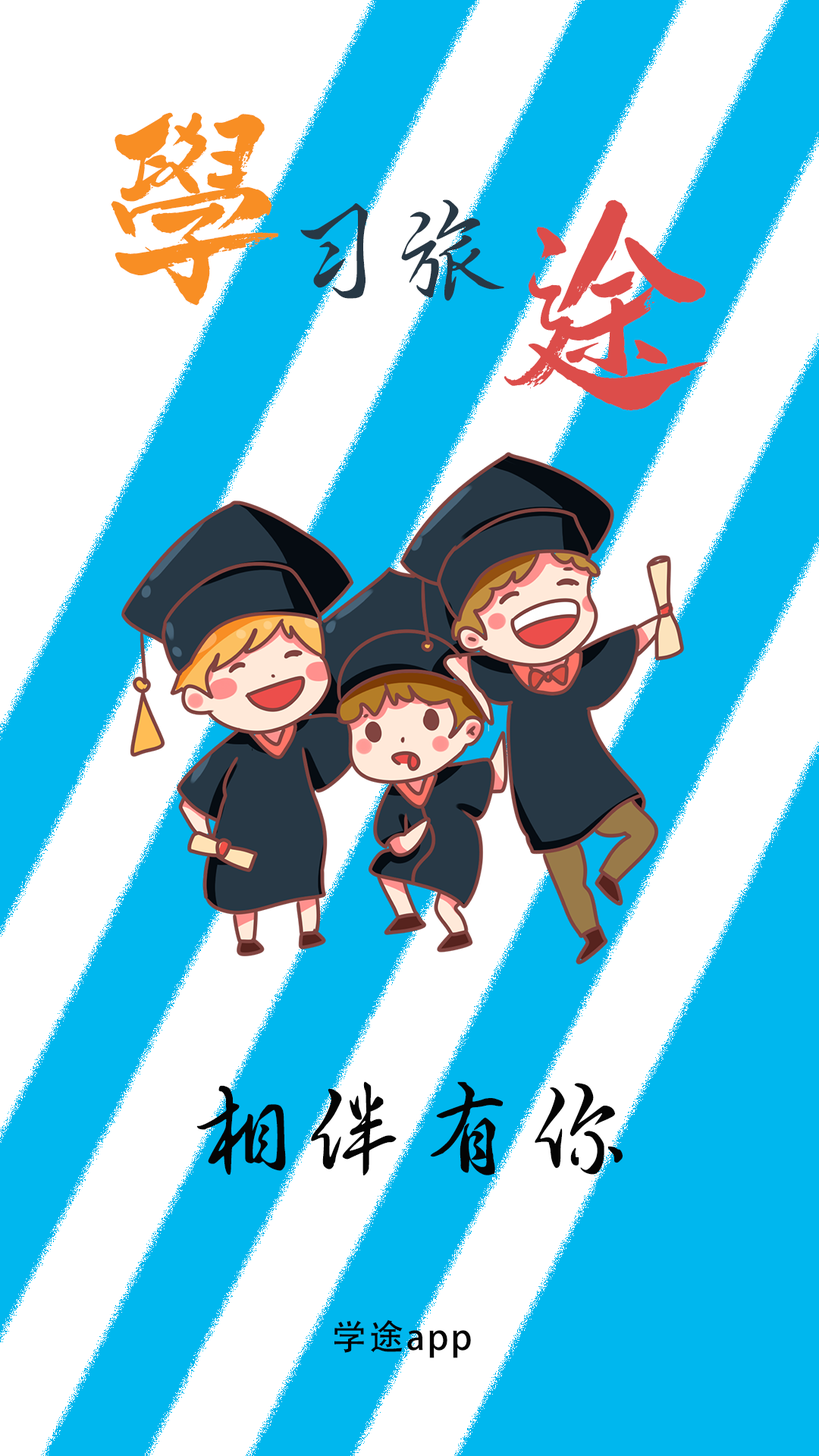
<style>
.page{position:relative;width:819px;height:1456px;background:#00b7ee}
.page>*{position:absolute;margin:0}
.t1{font:210.6px "HBJGTPFT--GB1-0";letter-spacing:0.06em;color:#f88e24}
.t2{font:111.9px "yizhiqingshu";letter-spacing:0.06em;color:#273845}
.t3{font:231px "HBJGTPFT--GB1-0";letter-spacing:0.06em;color:#dc4d4a}
.t4{font:106.2px "yizhiqingshu";letter-spacing:0.06em;color:#040404}
.t5{font:35.2px "AdobeHeitiStd-Regular";letter-spacing:0.06em;color:#040404}
</style>
<div class="page">
<p class="t1" style="left:111px;top:112px;width:168px;height:194px">学</p>
<p class="t2" style="left:300px;top:199px;width:204px;height:102px">习旅</p>
<p class="t3" style="left:504px;top:199px;width:204px;height:212px">途</p>
<p class="t4" style="left:196px;top:1081px;width:427px;height:94px">相伴有你</p>
<p class="t5" style="left:334px;top:1319px;width:137px;height:39px">学途app</p>
</div>
